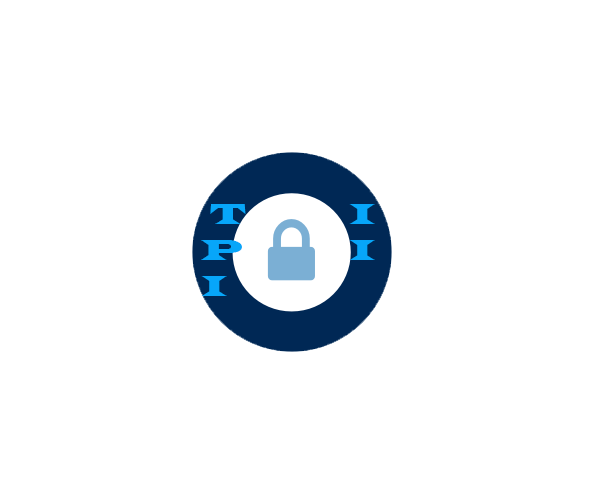
<style>
.page{position:relative;width:590px;height:501px;background:#ffffff}
.page>*{position:absolute;margin:0}
.t1{font:30px "LatinWide";color:#07a6f9}
.t2{font:30px "LatinWide";color:#fbfaf8}
</style>
<div class="page">
<p class="t1" style="left:201px;top:204px;width:45px;height:92px"><span class="t2"> </span>T<br>P<br>I</p>
<p class="t1" style="left:349px;top:204px;width:26px;height:56px">I<br>I</p>
</div>
